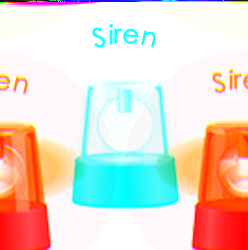
<style>
.page{position:relative;width:248px;height:250px;background:#fff8fa}
.page>*{position:absolute;margin:0}
.t1{font:26px "CenturyGothic";font-weight:bold}
</style>
<div class="page">
<p class="t1" style="left:92px;top:22px;width:64px;height:24px">Siren</p>
</div>
